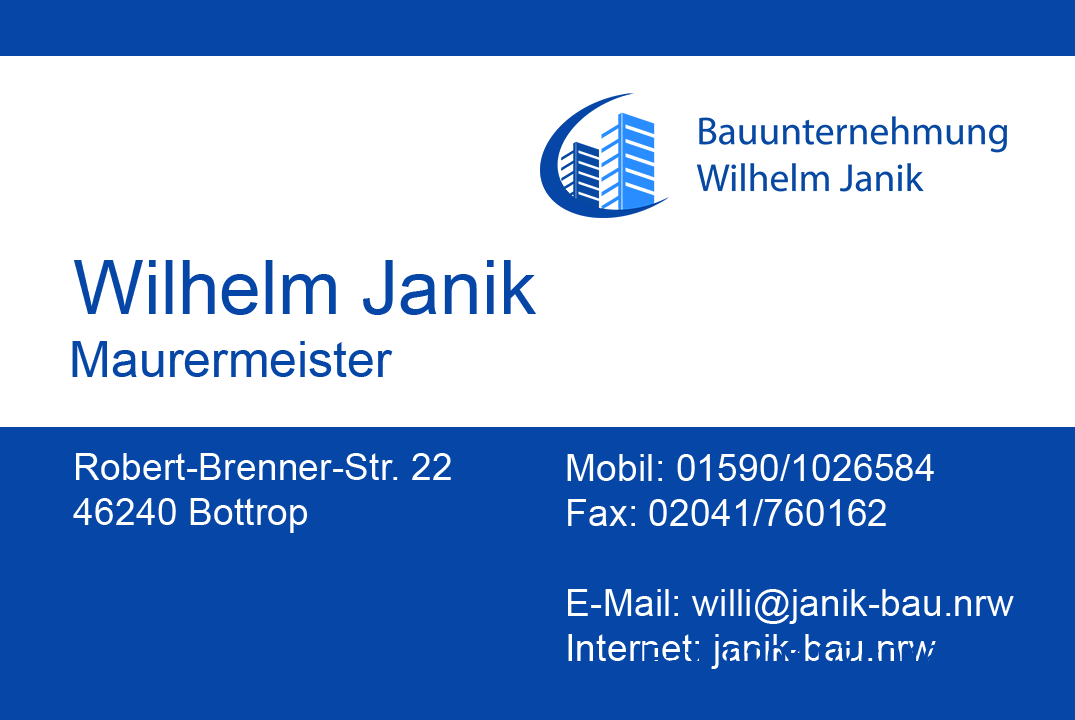
<style>
.page{position:relative;width:1075px;height:720px;background:#ffffff}
.page>*{position:absolute;margin:0}
.t1{font:75px "ArialMT";color:#0546a6}
.t2{font:50px "ArialMT";color:#0546a6}
.t3{font:37.5px "ArialMT";color:#ffffff}
</style>
<div class="page">
<p class="t1" style="left:74px;top:260px;width:462px;height:55px">Wilhelm Janik</p>
<p class="t2" style="left:72px;top:341px;width:321px;height:36px">Maurermeister</p>
<p class="t3" style="left:73px;top:453px;width:378px;height:80px">Robert-Brenner-Str. 22<br>46240 Bottrop</p>
<p class="t3" style="left:567px;top:454px;width:447px;height:215px">Mobil: 01590/1026584<br>Fax: 02041/760162<br><br>E-Mail: willi@janik-bau.nrw<br>Internet: janik-bau.nrw</p>
</div>
